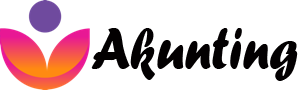
<style>
.page{position:relative;width:300px;height:90px;background:#ffffff}
.page>*{position:absolute;margin:0}
.t1{font:61px "ForteMT";color:#030001;scale:0.87 1}
</style>
<div class="page">
<p class="t1" style="left:91px;top:28px;width:207px;height:53px">Akunting</p>
</div>
